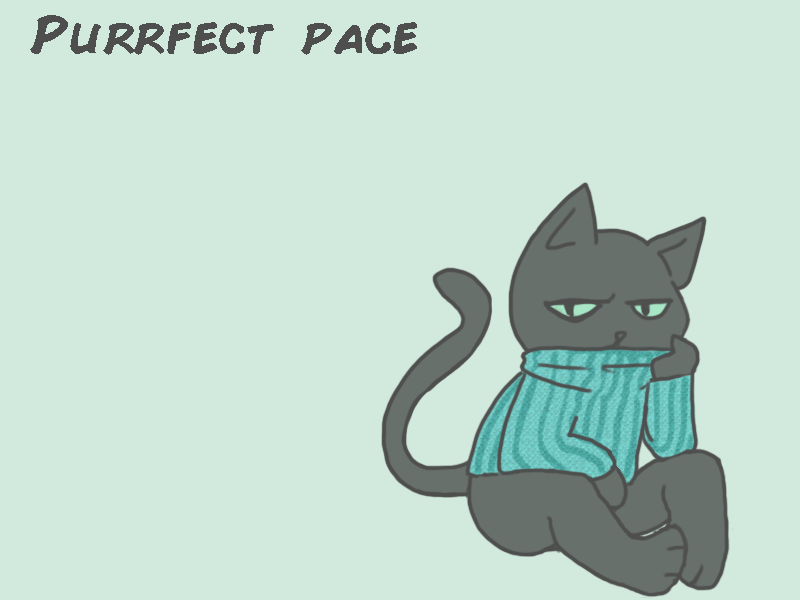
<style>
.page{position:relative;width:800px;height:600px;background:#d2e9dd}
.page>*{position:absolute;margin:0}
.t1{font:51.1px "ComicBook-Bold";color:#4d4e4d}
</style>
<div class="page">
<p class="t1" style="left:30px;top:15px;width:387px;height:40px">Purrfect pace</p>
</div>
